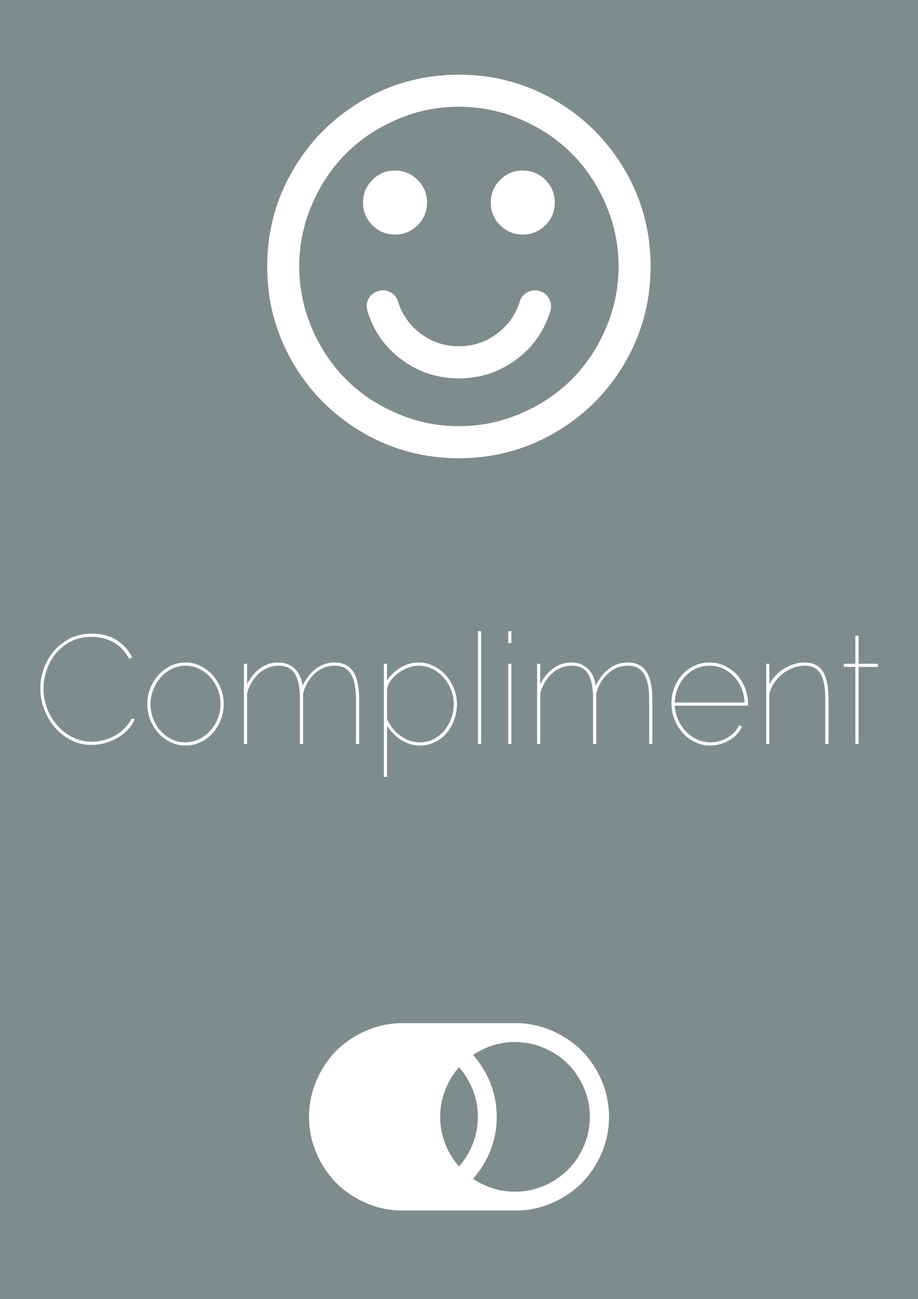
<style>
.page{position:relative;width:918px;height:1299px;background:#7f8c8d}
.page>*{position:absolute;margin:0}
.t1{font:154.3px "Raleway-Thin";color:#ffffff}
</style>
<div class="page">
<p class="t1" style="left:40px;top:631px;width:838px;height:146px">Compliment</p>
</div>
